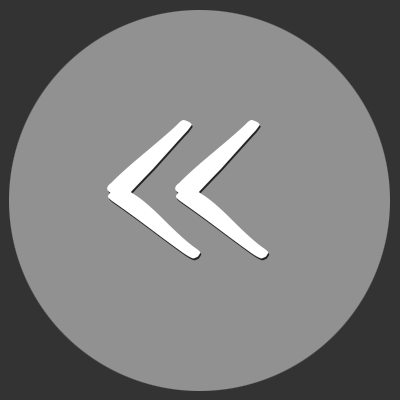
<style>
.page{position:relative;width:400px;height:400px;background:#919191}
.page>*{position:absolute;margin:0}
.t1{font:334px "CalifornianFB-Reg";letter-spacing:-0.12em;color:#ffffff;scale:1.25 1}
</style>
<div class="page">
<p class="t1" style="left:107px;top:120px;width:162px;height:139px">&lt;&lt;</p>
</div>
